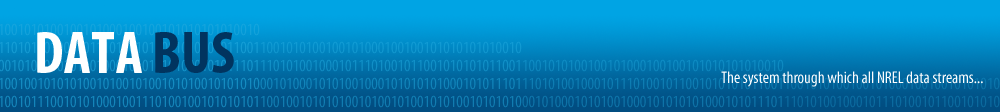
<style>
.page{position:relative;width:1000px;height:112px}
.page>*{position:absolute;margin:0}
.t1{font:60px "MyriadPro-BoldCond";color:#feffff}
.t2{font:60px "MyriadPro-BoldCond";color:#01345f}
.t3{font:17px "MyriadPro-Cond";color:#fcfdfe}
</style>
<div class="page">
<p class="t1" style="left:37px;top:32px;width:197px;height:41px">DATA <span class="t2">BUS</span></p>
<p class="t3" style="left:721px;top:71px;width:262px;height:16px">The system through which all NREL data streams...</p>
</div>
